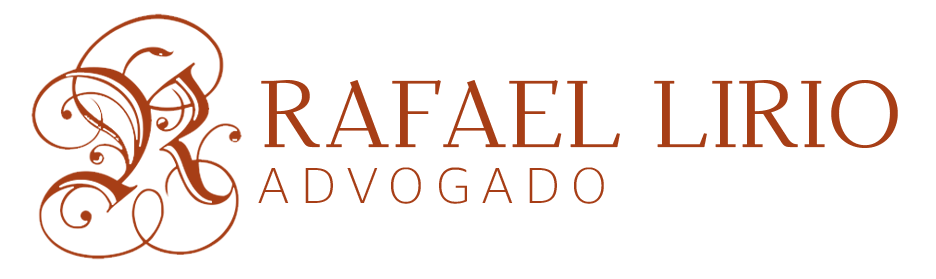
<style>
.page{position:relative;width:936px;height:279px;background:#ffffff}
.page>*{position:absolute;margin:0}
.t1{font:94.1px "Dehuti-Book";color:#a73e16}
.t2{font:48px "DejaVuSans-ExtraLight";letter-spacing:0.2em;color:#a73e16;text-transform:uppercase}
</style>
<div class="page">
<p class="t1" style="left:261px;top:80px;width:637px;height:68px">RAFAEL LIRIO</p>
<p class="t2" style="left:258px;top:167px;width:346px;height:37px">Advogado</p>
</div>
